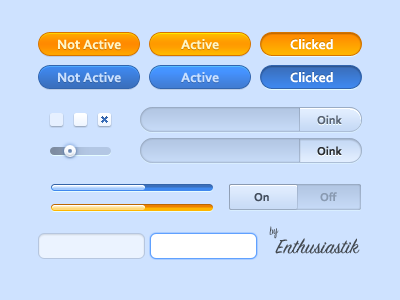
<style>
.page{position:relative;width:400px;height:300px;background:#cee2ff}
.page>*{position:absolute;margin:0}
.t1{font:14px "Corbel-Bold";color:#fff5c6}
.t2{font:14px "Corbel-Bold";color:#ffffff}
.t3{font:14px "Corbel-Bold";color:#cae0fe}
.t4{font:14px "Corbel-Bold";color:#cae0ff}
.t5{font:12px "Corbel-Bold";color:#566273}
.t6{font:12px "Corbel-Bold";color:#272b31}
.t7{font:12px "Corbel-Bold";color:#424d5c}
.t8{font:12px "Corbel-Bold";color:#899ab1}
.t9{font:12px "SignPainter-HouseScript";color:#444a51}
.t10{font:22px "SignPainter-HouseScript";color:#444a51}
</style>
<div class="page">
<p class="t1" style="left:58px;top:39px;width:63px;height:11px">Not Active</p>
<p class="t1" style="left:181px;top:39px;width:38px;height:11px">Active</p>
<p class="t2" style="left:290px;top:39px;width:43px;height:11px">Clicked</p>
<p class="t3" style="left:58px;top:72px;width:63px;height:11px">Not Active</p>
<p class="t4" style="left:181px;top:72px;width:38px;height:11px">Active</p>
<p class="t2" style="left:290px;top:72px;width:43px;height:11px">Clicked</p>
<p class="t5" style="left:317px;top:115px;width:25px;height:10px">Oink</p>
<p class="t6" style="left:317px;top:146px;width:25px;height:10px">Oink</p>
<p class="t7" style="left:254px;top:193px;width:15px;height:9px">On</p>
<p class="t8" style="left:320px;top:192px;width:17px;height:10px">Off</p>
<p class="t9" style="left:269px;top:226px;width:10px;height:13px;rotate:-21deg">by</p>
<p class="t10" style="left:275px;top:238px;width:85px;height:16px">Enthusiastik</p>
</div>
